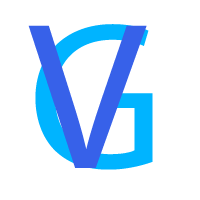
<style>
.page{position:relative;width:200px;height:200px;background:#ffffff}
.page>*{position:absolute;margin:0}
.t1{font:211.2px "MyriadPro-Regular";color:#3761e9}
.t2{font:211.2px "MyriadPro-Regular";color:#00b4ff}
</style>
<div class="page">
<p class="t1" style="left:28px;top:25px;width:119px;height:143px">V</p>
<p class="t2" style="left:35px;top:24px;width:118px;height:146px">G</p>
</div>
